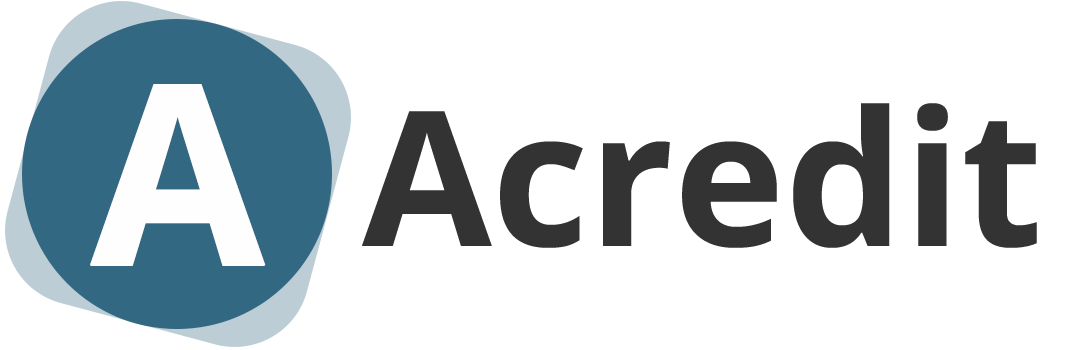
<style>
.page{position:relative;width:1066px;height:350px;background:#ffffff}
.page>*{position:absolute;margin:0}
.t1{font:251px "OpenSans-Bold";color:#fefefe;font-weight:bold}
.t2{font:188px "OpenSans-Bold";color:#333333}
</style>
<div class="page">
<p class="t1" style="left:90px;top:84px;width:176px;height:182px">A</p>
<p class="t2" style="left:362px;top:103px;width:675px;height:145px">Acredit</p>
</div>
